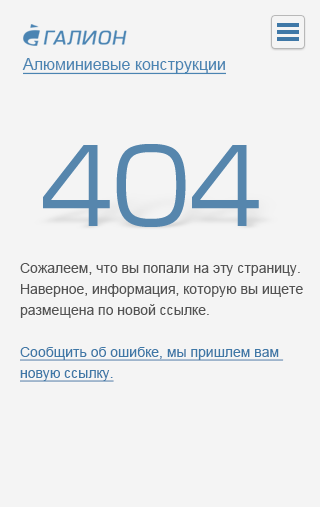
<style>
.page{position:relative;width:320px;height:507px;background:#f4f4f4}
.page>*{position:absolute;margin:0}
.t1{font:16px "ArialMT";color:#4a84b2;text-decoration:underline}
.t2{font:14px/21px "ArialMT";color:#545454}
.t3{font:14px/21px "ArialMT";color:#3f78a7;text-decoration:underline}
</style>
<div class="page">
<p class="t1" style="left:22px;top:58px;width:204px;height:17px">Алюминиевые конструкции</p>
<p class="t2" style="left:20px;top:263px;width:283px;height:119px">Сожалеем, что вы попали на эту страницу. <br>Наверное, информация, которую вы ищете <br>размещена по новой ссылке. <br><br><span class="t3">Сообщить об ошибке, мы пришлем вам <br>новую ссылку.</span></p>
</div>
